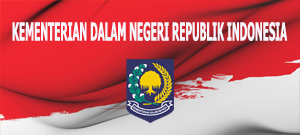
<style>
.page{position:relative;width:300px;height:135px}
.page>*{position:absolute;margin:0}
.t1{font:25px "Tahoma-Bold";color:#f6f7fc;scale:0.4 1}
</style>
<div class="page">
<p class="t1" style="left:12px;top:22px;width:276px;height:19px">KEMENTERIAN DALAM NEGERI REPUBLIK INDONESIA</p>
</div>
